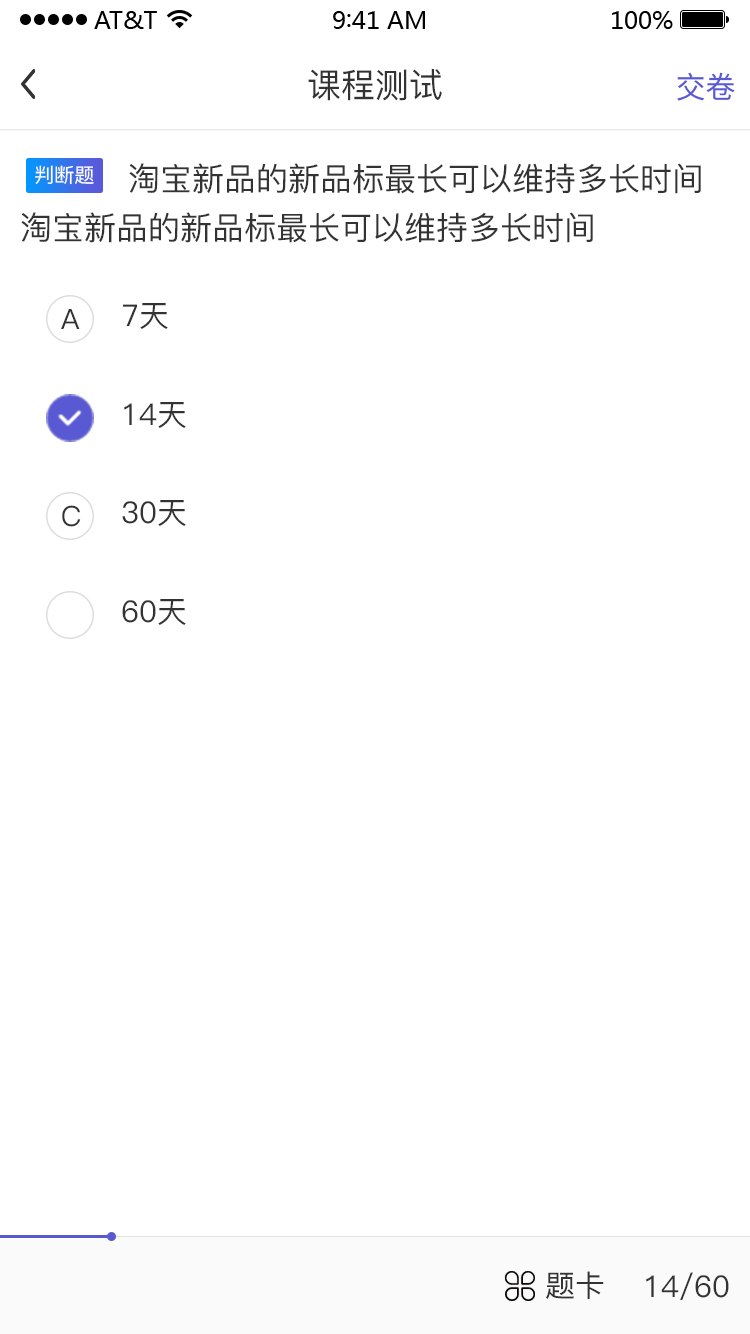
<style>
.page{position:relative;width:750px;height:1334px;background:#ffffff}
.page>*{position:absolute;margin:0}
.t1{font:34px "PingFang-SC-Medium";color:#333333}
.t2{font:30px "SourceHanSansCN-Regular";color:#595ad3}
.t3{font:20px "PingFang-SC-Medium";color:#ffffff}
.t4{font:32px "PingFang-SC-Medium";color:#333333}
.t5{font:30px "PingFang-SC-Medium";color:#333333}
.t6{font:28px "PingFang-SC-Medium";color:#333333}
</style>
<div class="page">
<p class="t1" style="left:308px;top:69px;width:134px;height:32px">课程测试</p>
<p class="t2" style="left:677px;top:72px;width:58px;height:29px">交卷</p>
<p class="t3" style="left:35px;top:165px;width:59px;height:20px">判断题</p>
<p class="t4" style="left:129px;top:163px;width:572px;height:31px">淘宝新品的新品标最长可以维持多长时间</p>
<p class="t4" style="left:21px;top:212px;width:572px;height:31px">淘宝新品的新品标最长可以维持多长时间</p>
<p class="t5" style="left:123px;top:303px;width:45px;height:26px">7天</p>
<p class="t6" style="left:61px;top:309px;width:19px;height:20px">A</p>
<p class="t5" style="left:124px;top:402px;width:62px;height:26px">14天</p>
<p class="t6" style="left:62px;top:505px;width:19px;height:22px">C</p>
<p class="t5" style="left:122px;top:500px;width:64px;height:26px">30天</p>
<p class="t5" style="left:122px;top:599px;width:64px;height:26px">60天</p>
<p class="t5" style="left:546px;top:1271px;width:58px;height:28px">题卡</p>
<p class="t5" style="left:646px;top:1272px;width:83px;height:28px">14/60</p>
</div>
